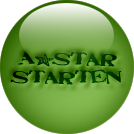
<style>
.page{position:relative;width:134px;height:134px}
.page>*{position:absolute;margin:0}
.t1{font:15px "StampActJumbled";color:#013401;scale:1.4 1}
</style>
<div class="page">
<p class="t1" style="left:10px;top:51px;width:112px;height:34px;text-align:center">A*Star<br>Starten</p>
</div>
